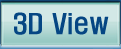
<style>
.page{position:relative;width:121px;height:49px;background:#d2e8e6}
.page>*{position:absolute;margin:0}
.t1{font:25px "H2hdrM";color:#054683}
</style>
<div class="page">
<p class="t1" style="left:14px;top:12px;width:95px;height:23px">3D View</p>
</div>
